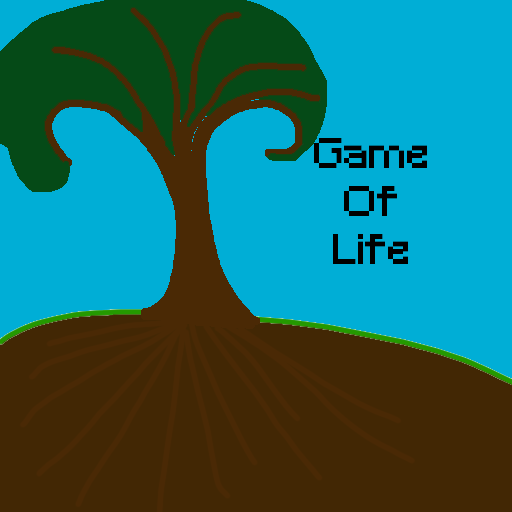
<style>
.page{position:relative;width:512px;height:512px;background:#00aed6}
.page>*{position:absolute;margin:0}
.t1{font:40px "Minecraft";color:#000000}
</style>
<div class="page">
<p class="t1" style="left:314px;top:138px;width:113px;height:126px;text-align:center">Game <br>Of <br>Life</p>
</div>
